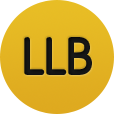
<style>
.page{position:relative;width:114px;height:114px;background:#ffffff}
.page>*{position:absolute;margin:0}
.t1{font:50.7px "SourceSansPro-ExtraLight";letter-spacing:0.02em;color:#000000;scale:0.9 1}
</style>
<div class="page">
<p class="t1" style="left:26px;top:39px;width:64px;height:34px">LLB</p>
</div>
